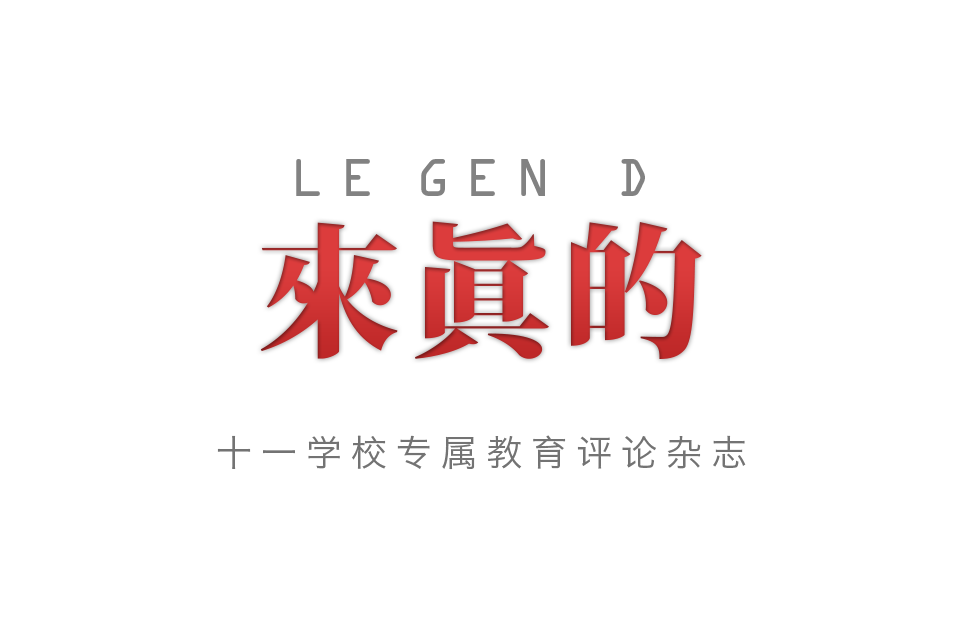
<style>
.page{position:relative;width:960px;height:640px;background:#ffffff}
.page>*{position:absolute;margin:0}
.t1{font:48px "OCRAStd";letter-spacing:-0.2em;color:#828282}
.t2{font:144px "KozMinPr6N-Heavy";letter-spacing:0.05em;color:#cd3434}
.t3{font:36px "HiraginoSansGB-W3";letter-spacing:0.25em;color:#737373}
</style>
<div class="page">
<p class="t1" style="left:296px;top:159px;width:349px;height:37px">L E  G E N   D</p>
<p class="t2" style="left:260px;top:221px;width:442px;height:138px">來眞的</p>
<p class="t3" style="left:217px;top:435px;width:529px;height:35px">十一学校专属教育评论杂志</p>
</div>
